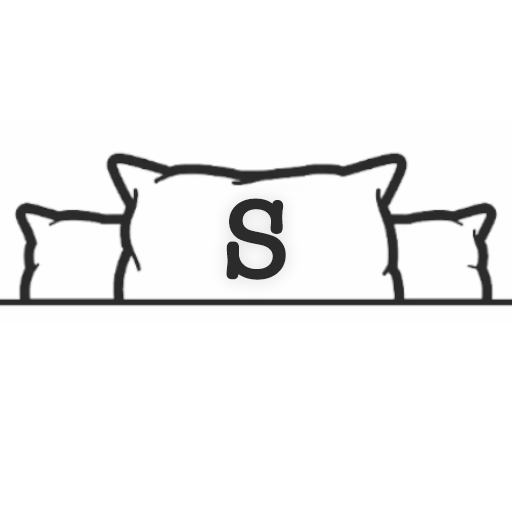
<style>
.page{position:relative;width:512px;height:512px;background:#ffffff}
.page>*{position:absolute;margin:0}
.t1{font:114px "AmericanTypewriter-Semibold";color:#2b2b2b}
</style>
<div class="page">
<p class="t1" style="left:226px;top:198px;width:60px;height:82px;rotate:1deg">S</p>
</div>
